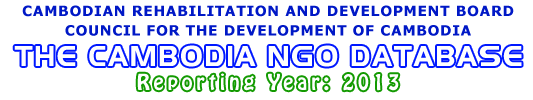
<style>
.page{position:relative;width:533px;height:100px;background:#ffffff}
.page>*{position:absolute;margin:0}
.t1{font:13.9px/19.4px "Verdana-Bold";letter-spacing:0.05em;color:#0018c6}
.t2{font:27.8px "Niamey";letter-spacing:0.1em;color:#fefefe;scale:0.94 1}
.t3{font:19.4px "HoboStd";letter-spacing:0.2em;color:#fefefe}
</style>
<div class="page">
<p class="t1" style="left:22px;top:5px;width:492px;height:31px;text-align:center">CAMBODIAN REHABILITATION AND DEVELOPMENT BOARD<br>COUNCIL FOR THE DEVELOPMENT OF CAMBODIA</p>
<p class="t2" style="left:14px;top:45px;width:508px;height:22px">THE CAMBODIA NGO DATABASE</p>
<p class="t3" style="left:137px;top:73px;width:262px;height:18px">Reporting Year: 2013</p>
</div>
